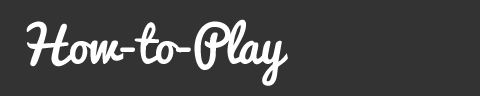
<style>
.page{position:relative;width:480px;height:96px;background:#333333}
.page>*{position:absolute;margin:0}
.t1{font:47.8px "Pacifico";color:#ffffff}
</style>
<div class="page">
<p class="t1" style="left:26px;top:19px;width:262px;height:67px">How-to-Play</p>
</div>
